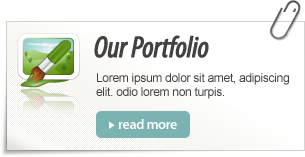
<style>
.page{position:relative;width:305px;height:157px;background:#ffffff}
.page>*{position:absolute;margin:0}
.t1{font:12px "ArialMT";letter-spacing:-0.025em;color:#444141}
</style>
<div class="page">
<p class="t1" style="left:96px;top:73px;width:193px;height:26px">Lorem ipsum dolor sit amet, adipiscing elit. odio lorem non turpis.</p>
</div>
